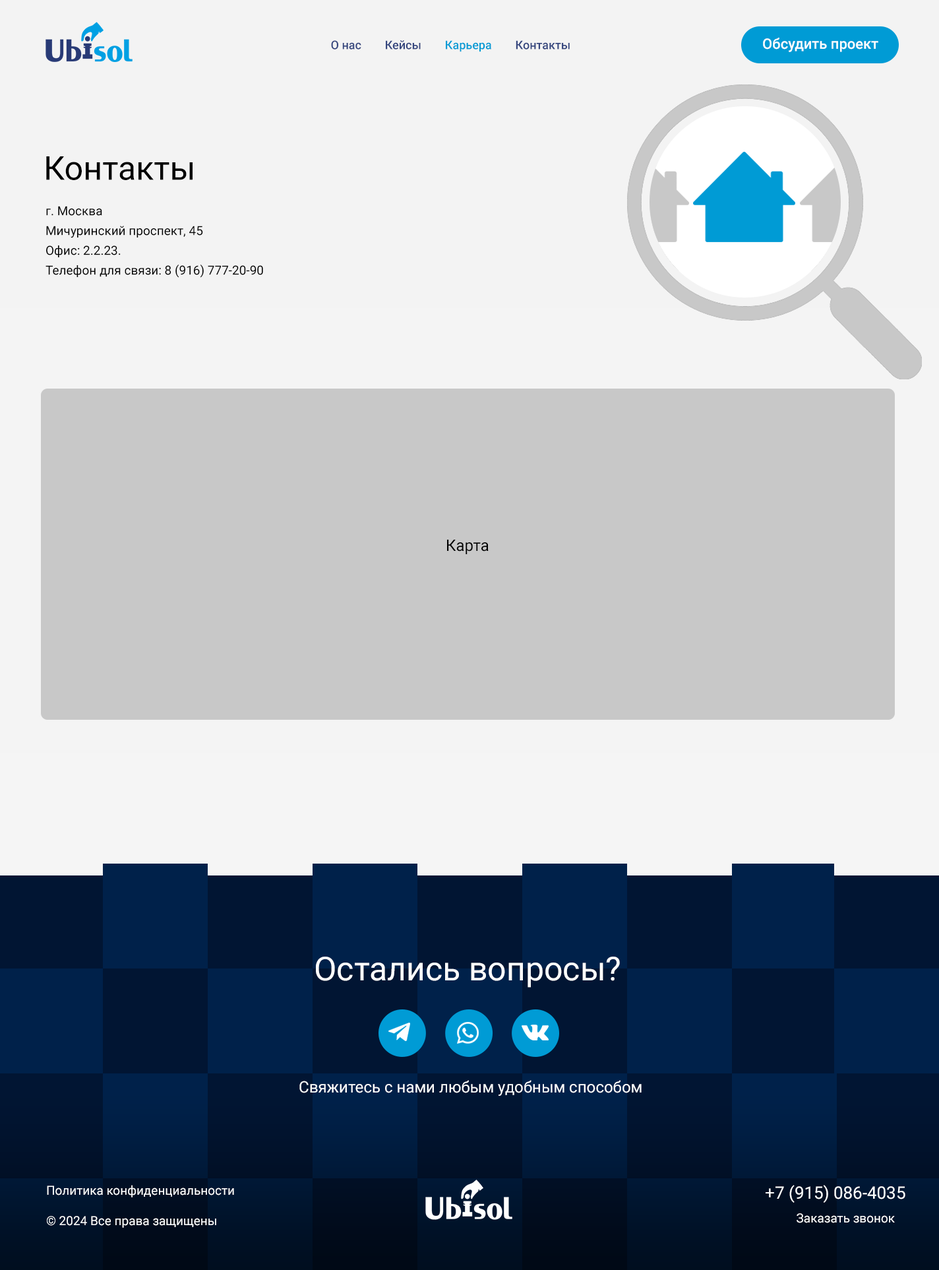
<style>
.page{position:relative;width:939px;height:1270px;background:#c8c8c8}
.page>*{position:absolute;margin:0}
.t1{font:11.9px "Roboto-Medium";color:#36477f}
.t2{font:11.9px "Roboto-Medium";color:#009bd5}
.t3{font:14.5px "Roboto-Medium";color:#ffffff}
.t4{font:33px "Roboto-Regular";color:#000000}
.t5{font:12.5px/19.8px "Roboto-Regular";color:#000000}
.t6{font:15.8px "Roboto-Regular";color:#000000}
.t7{font:33px "Roboto-Regular";color:#ffffff}
.t8{font:15.8px "Roboto-Regular";color:#ffffff}
.t9{font:12.5px "Roboto-Regular";color:#ffffff}
.t10{font:17.1px "Roboto-Regular";color:#ffffff;text-transform:uppercase}
</style>
<div class="page">
<p class="t1" style="left:331px;top:40px;width:239px;height:12px">О нас        Кейсы        <span class="t2">Карьера</span>        Контакты</p>
<p class="t3" style="left:763px;top:38px;width:116px;height:14px">Обсудить проект</p>
<p class="t4" style="left:46px;top:156px;width:147px;height:24px">Контакты</p>
<p class="t5" style="left:46px;top:206px;width:217px;height:72px">г. Москва <br>Мичуринский проспект, 45  <br>Офис: 2.2.23.<br>Телефон для связи: 8 (916) 777-20-90</p>
<p class="t6" style="left:447px;top:540px;width:42px;height:14px">Карта</p>
<p class="t7" style="left:316px;top:956px;width:304px;height:31px">Остались вопросы?</p>
<p class="t8" style="left:299px;top:1080px;width:343px;height:16px">Cвяжитесь с нами любым удобным способом</p>
<p class="t9" style="left:47px;top:1185px;width:187px;height:42px">Политика конфиденциальности<br><br>© 2024 Все права защищены</p>
<p class="t10" style="left:766px;top:1185px;width:140px;height:17px">+7 (915) 086-4035</p>
<p class="t9" style="left:797px;top:1213px;width:98px;height:10px">Заказать звонок</p>
</div>
